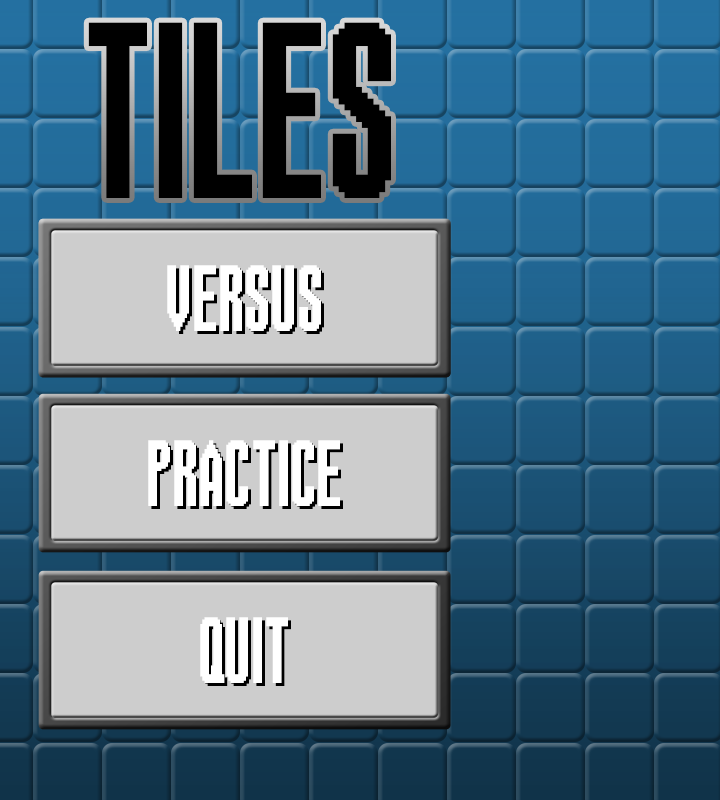
<style>
.page{position:relative;width:720px;height:800px;background:#cdcdcd}
.page>*{position:absolute;margin:0}
.t1{font:186.7px "TheFontAgainstGiygas";color:#000000}
.t2{font:70px "TheFontAgainstGiygas";color:#ffffff}
</style>
<div class="page">
<p class="t1" style="left:88px;top:22px;width:303px;height:176px">TILES</p>
<p class="t2" style="left:167px;top:265px;width:154px;height:66px">VERSUS</p>
<p class="t2" style="left:167px;top:265px;width:154px;height:66px">VERSUS</p>
<p class="t2" style="left:148px;top:440px;width:192px;height:66px">PRACTICE</p>
<p class="t2" style="left:200px;top:617px;width:88px;height:66px">QUIT</p>
</div>
